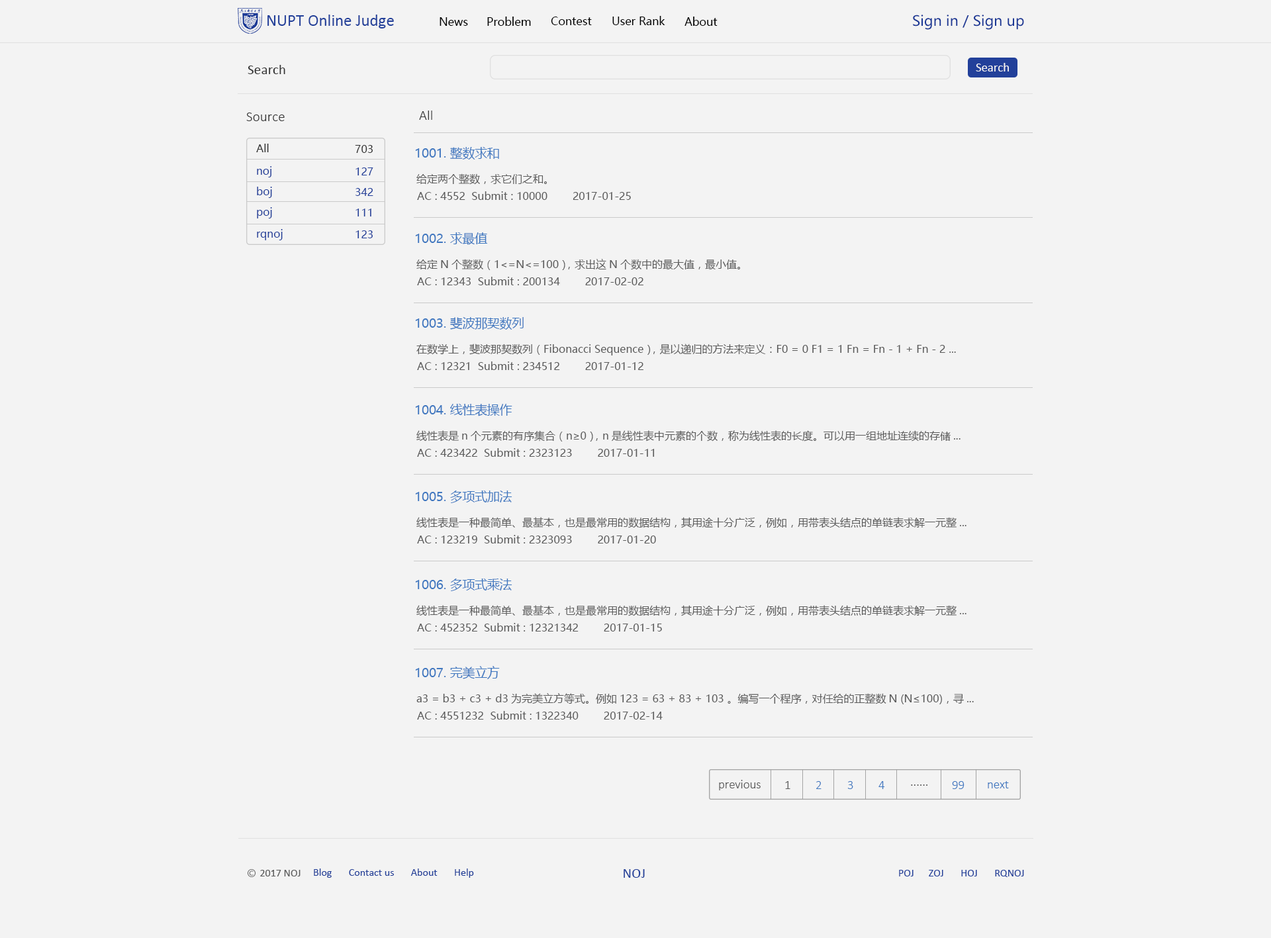
<style>
.page{position:relative;width:1271px;height:938px;background:#f3f3f3}
.page>*{position:absolute;margin:0}
.t1{font:16.6px "Calibri";color:#22409a}
.t2{font:11px "MicrosoftYaHei";color:#000000}
.t3{font:14.1px "MicrosoftYaHei";color:#1a3795}
.t4{font:14.1px "Calibri";color:#333333}
.t5{font:12.4px "Calibri";color:#f3f3f3}
.t6{font:14.1px "Calibri-Light";color:#333333}
.t7{font:10.6px "MicrosoftYaHei";color:#333333}
.t8{font:12.4px "MicrosoftYaHei";color:#4078c0}
.t9{font:10.6px "MicrosoftYaHei";color:#22409a}
.t10{font:10.6px "MicrosoftYaHei";color:#5b5b5b}
.t11{font:12.4px "Calibri-Light";color:#5b5b5b}
.t12{font:12.4px "Calibri-Light";color:#4078c0}
.t13{font:10.6px "Calibri";color:#5b5b5b}
.t14{font:10.6px "Calibri";color:#22409a}
.t15{font:14.1px "Calibri";color:#22409a}
</style>
<div class="page">
<p class="t1" style="left:267px;top:15px;width:127px;height:13px">NUPT Online Judge</p>
<p class="t2" style="left:440px;top:17px;width:28px;height:9px">News</p>
<p class="t2" style="left:487px;top:17px;width:44px;height:9px">Problem</p>
<p class="t2" style="left:551px;top:17px;width:41px;height:8px">Contest</p>
<p class="t2" style="left:612px;top:16px;width:53px;height:9px">User Rank</p>
<p class="t2" style="left:685px;top:17px;width:33px;height:9px">About</p>
<p class="t3" style="left:913px;top:15px;width:111px;height:15px">Sign in / Sign up</p>
<p class="t4" style="left:248px;top:65px;width:37px;height:9px">Search</p>
<p class="t5" style="left:976px;top:63px;width:33px;height:8px">Search</p>
<p class="t6" style="left:246px;top:113px;width:39px;height:8px">Source</p>
<p class="t6" style="left:419px;top:111px;width:13px;height:9px">All</p>
<p class="t7" style="left:256px;top:144px;width:13px;height:8px">All</p>
<p class="t7" style="left:355px;top:145px;width:18px;height:8px">703</p>
<p class="t8" style="left:415px;top:147px;width:84px;height:13px">1001. 整数求和</p>
<p class="t9" style="left:257px;top:166px;width:15px;height:11px">noj</p>
<p class="t9" style="left:356px;top:167px;width:17px;height:8px">127</p>
<p class="t10" style="left:416px;top:173px;width:131px;height:12px">给定两个整数，求它们之和。</p>
<p class="t9" style="left:257px;top:187px;width:15px;height:11px">boj</p>
<p class="t9" style="left:356px;top:188px;width:17px;height:8px">342</p>
<p class="t10" style="left:417px;top:191px;width:214px;height:9px">AC : 4552  Submit : 10000        2017-01-25</p>
<p class="t9" style="left:257px;top:207px;width:15px;height:11px">poj</p>
<p class="t9" style="left:356px;top:209px;width:15px;height:7px">111</p>
<p class="t9" style="left:257px;top:229px;width:26px;height:11px">rqnoj</p>
<p class="t9" style="left:356px;top:230px;width:17px;height:8px">123</p>
<p class="t8" style="left:415px;top:232px;width:73px;height:13px">1002. 求最值</p>
<p class="t10" style="left:416px;top:259px;width:324px;height:11px">给定N个整数（1&lt;=N&lt;=100），求出这N个数中的最大值，最小值。</p>
<p class="t10" style="left:417px;top:277px;width:226px;height:8px">AC : 12343  Submit : 200134        2017-02-02</p>
<p class="t8" style="left:415px;top:317px;width:109px;height:13px">1003. 斐波那契数列</p>
<p class="t10" style="left:416px;top:344px;width:540px;height:12px">在数学上，斐波那契数列（Fibonacci Sequence），是以递归的方法来定义：F0 = 0 F1 = 1 Fn = Fn - 1 + Fn - 2 ...</p>
<p class="t10" style="left:417px;top:361px;width:226px;height:9px">AC : 12321  Submit : 234512        2017-01-12</p>
<p class="t8" style="left:415px;top:404px;width:97px;height:12px">1004. 线性表操作</p>
<p class="t10" style="left:416px;top:430px;width:545px;height:12px">线性表是n个元素的有序集合（n≥0），n是线性表中元素的个数，称为线性表的长度。可以用一组地址连续的存储...</p>
<p class="t10" style="left:417px;top:448px;width:238px;height:9px">AC : 423422  Submit : 2323123        2017-01-11</p>
<p class="t8" style="left:415px;top:491px;width:97px;height:12px">1005. 多项式加法</p>
<p class="t10" style="left:416px;top:517px;width:551px;height:11px">线性表是一种最简单、最基本，也是最常用的数据结构，其用途十分广泛，例如，用带表头结点的单链表求解一元整...</p>
<p class="t10" style="left:417px;top:535px;width:239px;height:9px">AC : 123219  Submit : 2323093        2017-01-20</p>
<p class="t8" style="left:415px;top:579px;width:97px;height:12px">1006. 多项式乘法</p>
<p class="t10" style="left:416px;top:605px;width:551px;height:11px">线性表是一种最简单、最基本，也是最常用的数据结构，其用途十分广泛，例如，用带表头结点的单链表求解一元整...</p>
<p class="t10" style="left:417px;top:623px;width:245px;height:9px">AC : 452352  Submit : 12321342        2017-01-15</p>
<p class="t8" style="left:415px;top:666px;width:85px;height:13px">1007. 完美立方</p>
<p class="t10" style="left:416px;top:693px;width:558px;height:11px">a3 = b3 + c3 + d3为完美立方等式。例如123 = 63 + 83 + 103 。编写一个程序，对任给的正整数N (N≤100)，寻...</p>
<p class="t10" style="left:417px;top:711px;width:246px;height:9px">AC : 4551232  Submit : 1322340        2017-02-14</p>
<p class="t11" style="left:719px;top:780px;width:42px;height:10px">previous</p>
<p class="t11" style="left:785px;top:781px;width:5px;height:8px">1</p>
<p class="t12" style="left:816px;top:781px;width:6px;height:8px">2</p>
<p class="t12" style="left:847px;top:781px;width:6px;height:8px">3</p>
<p class="t12" style="left:879px;top:781px;width:6px;height:8px">4</p>
<p class="t11" style="left:911px;top:785px;width:17px;height:1px">......</p>
<p class="t12" style="left:952px;top:781px;width:13px;height:8px">99</p>
<p class="t12" style="left:988px;top:781px;width:21px;height:7px">next</p>
<p class="t13" style="left:260px;top:870px;width:41px;height:7px">2017 NOJ</p>
<p class="t14" style="left:314px;top:869px;width:160px;height:9px">Blog       Contact us       About       Help</p>
<p class="t15" style="left:624px;top:869px;width:21px;height:9px">NOJ</p>
<p class="t14" style="left:899px;top:870px;width:125px;height:7px">POJ      ZOJ       HOJ       RQNOJ</p>
</div>
